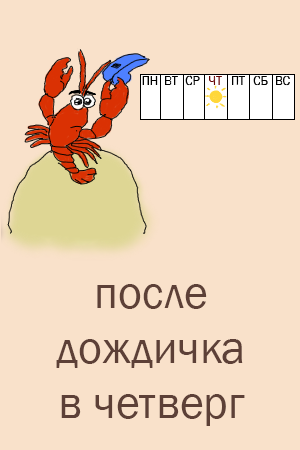
<style>
.page{position:relative;width:300px;height:450px;background:#f9e1ca}
.page>*{position:absolute;margin:0}
.t1{font:45.8px "FranklinGothic-Book";color:#5d4037}
</style>
<div class="page">
<p class="t1" style="left:56px;top:284px;width:189px;height:142px;text-align:center">после<br> дождичка <br>в четверг</p>
</div>
